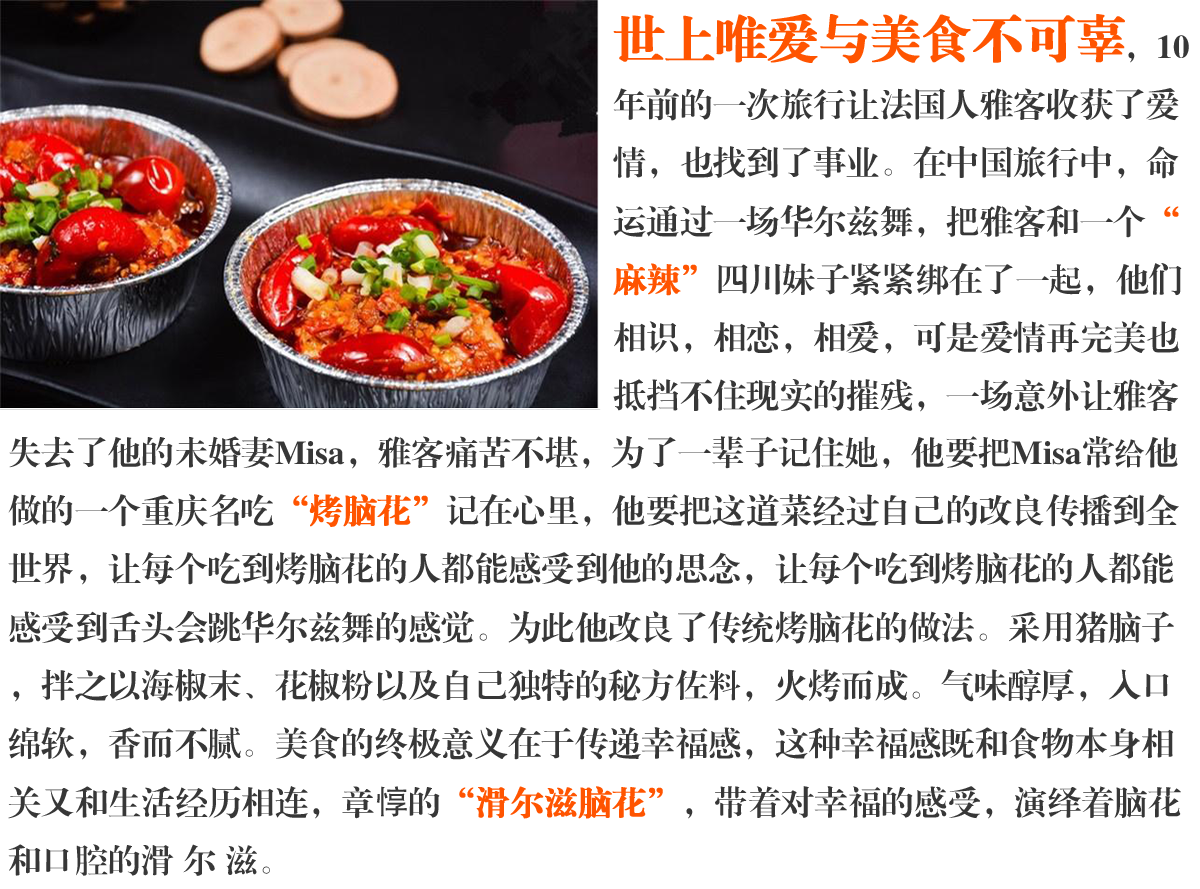
<style>
.page{position:relative;width:1200px;height:889px;background:#ffffff}
.page>*{position:absolute;margin:0}
.t1{font:50px "FZXBSJW--GB1-0";color:#ff5400;font-weight:bold}
.t2{font:33.3px "FZXBSJW--GB1-0";color:#373737}
.t3{font:30px "FZXBSJW--GB1-0";color:#373737}
.t4{font:33.3px "FZXBSJW--GB1-0";color:#ff5400;font-weight:bold}
.t5{font:33.3px "AdobeHeitiStd-Regular";color:#373737}
</style>
<div class="page">
<p class="t1" style="left:613px;top:14px;width:512px;height:50px">世上唯爱与美食不可辜负</p>
<p class="t2" style="left:613px;top:35px;width:576px;height:377px"><span class="t3">                                                                    </span>，10年前的一次旅行让法国人雅客收获了爱情，也找到了事业。在中国旅行中，命运通过一场华尔兹舞，把雅客和一个<span class="t4">“麻辣”</span>四川妹子紧紧绑在了一起，他们相识，相恋，相爱，可是爱情再完美也抵挡不住现实的摧残，一场意外让雅客</p>
<p class="t2" style="left:8px;top:436px;width:1173px;height:440px">失去了他的未婚妻Misa，雅客痛苦不堪，为了一辈子记住她，他要把Misa常<span class="t3">给</span>他做的一个重庆名吃<span class="t4">“烤脑花”</span>记在心里，他要把这道菜经过自己的改良传播到全世界，让每个吃到烤脑花的人都能感受到他的思念，让每个吃到烤脑花的人都能感受到舌头会跳华尔兹舞的感觉。为此他改良了传统烤脑花的做法。采用猪脑子，拌之以海椒末、花椒粉以及自己独特的秘方佐料，火烤而成。气味醇厚，入口绵软，香而不腻。美食的终极意义在于传递幸福感，这种幸福感既和食物本身相关又和生活经历相连，章<span class="t5">惇</span>的<span class="t4">“滑尔滋脑花”</span>，带着对幸福的感受，演绎着脑花和口腔的滑 尔 滋。</p>
</div>
